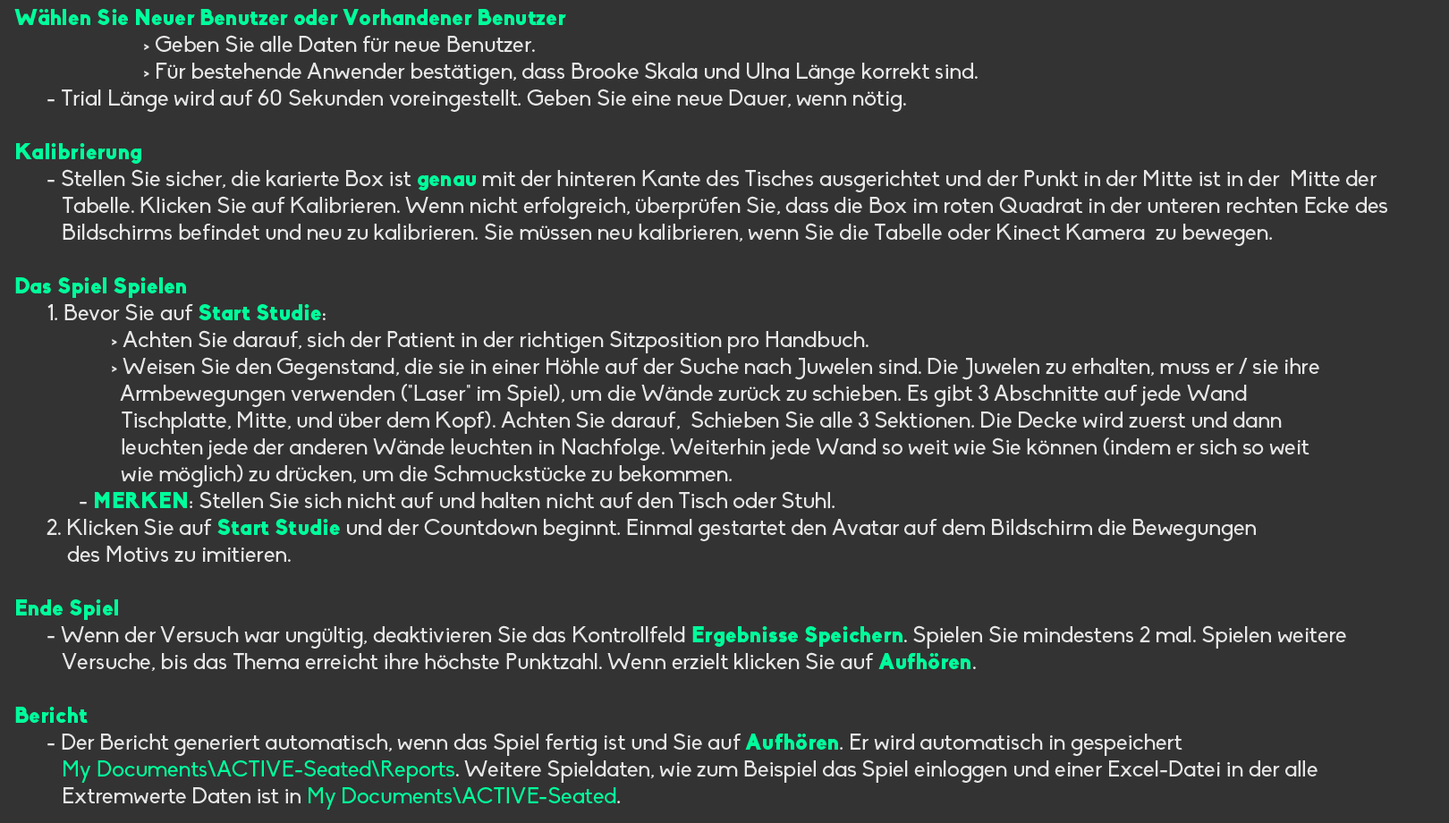
<style>
.page{position:relative;width:1449px;height:823px;background:#333333}
.page>*{position:absolute;margin:0}
.t1{font:22.4px "Biko";color:#e6e6e6}
.t2{font:22.4px "Biko-Black";color:#00fe9b}
.t3{font:22.4px "Biko";color:#00fe9b}
</style>
<div class="page">
<p class="t1" style="left:14px;top:9px;width:1373px;height:800px"><span class="t2">Wählen Sie Neuer Benutzer oder Vorhandener Benutzer <br></span>    &gt; Geben Sie alle Daten für neue Benutzer. <br>    &gt; Für bestehende Anwender bestätigen, dass Brooke Skala und Ulna Länge korrekt sind. <br> - Trial Länge wird auf 60 Sekunden voreingestellt. Geben Sie eine neue Dauer, wenn nötig. <br><br><span class="t2">Kalibrierung <br></span> - Stellen Sie sicher, die karierte Box ist <span class="t2">genau </span>mit der hinteren Kante des Tisches ausgerichtet und der Punkt in der Mitte ist in der  Mitte der <br>    Tabelle. Klicken Sie auf Kalibrieren. Wenn nicht erfolgreich, überprüfen Sie, dass die Box im roten Quadrat in der unteren rechten Ecke des <br>    Bildschirms befindet und neu zu kalibrieren. Sie müssen neu kalibrieren, wenn Sie die Tabelle oder Kinect Kamera  zu bewegen. <br><br><span class="t2">Das Spiel Spielen</span> <br> 1. Bevor Sie auf <span class="t2">Start Studie</span>: <br>   &gt; Achten Sie darauf, sich der Patient in der richtigen Sitzposition pro Handbuch. <br>   &gt; Weisen Sie den Gegenstand, die sie in einer Höhle auf der Suche nach Juwelen sind. Die Juwelen zu erhalten, muss er / sie ihre <br>          Armbewegungen verwenden ("Laser" im Spiel), um die Wände zurück zu schieben. Es gibt 3 Abschnitte auf jede Wand <br>     Tischplatte, Mitte, und über dem Kopf). Achten Sie darauf,  Schieben Sie alle 3 Sektionen. Die Decke wird zuerst und dann <br>     leuchten jede der anderen Wände leuchten in Nachfolge. Weiterhin jede Wand so weit wie Sie können (indem er sich so weit <br>     wie möglich) zu drücken, um die Schmuckstücke zu bekommen. <br>  - <span class="t2">MERKEN</span>: Stellen Sie sich nicht auf und halten nicht auf den Tisch oder Stuhl. <br> 2. Klicken Sie auf <span class="t2">Start Studie</span> und der Countdown beginnt. Einmal gestartet den Avatar auf dem Bildschirm die Bewegungen <br>     des Motivs zu imitieren. <br><br><span class="t2">Ende Spiel <br></span> - Wenn der Versuch war ungültig, deaktivieren Sie das Kontrollfeld <span class="t2">Ergebnisse Speichern</span>. Spielen Sie mindestens 2 mal. Spielen weitere <br>    Versuche, bis das Thema erreicht ihre höchste Punktzahl. Wenn erzielt klicken Sie auf <span class="t2">Aufhören</span>.<br><br><span class="t2">Bericht <br></span> - Der Bericht generiert automatisch, wenn das Spiel fertig ist und Sie auf <span class="t2">Aufhören</span>. Er wird automatisch in gespeichert <br>    <span class="t3">My Documents\ACTIVE-Seated\Reports</span>. Weitere Spieldaten, wie zum Beispiel das Spiel einloggen und einer Excel-Datei in der alle <br>    Extremwerte Daten ist in <span class="t3">My Documents\ACTIVE-Seated</span>.</p>
</div>
